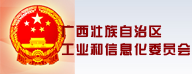
<style>
.page{position:relative;width:192px;height:74px}
.page>*{position:absolute;margin:0}
.t1{font:13.2px/18.3px "FZZYJW--GB1-0";letter-spacing:0.1em;color:#8d0003}
</style>
<div class="page">
<p class="t1" style="left:61px;top:25px;width:129px;height:31px">广西壮族自治区<br>工业和信息化委员会</p>
</div>
